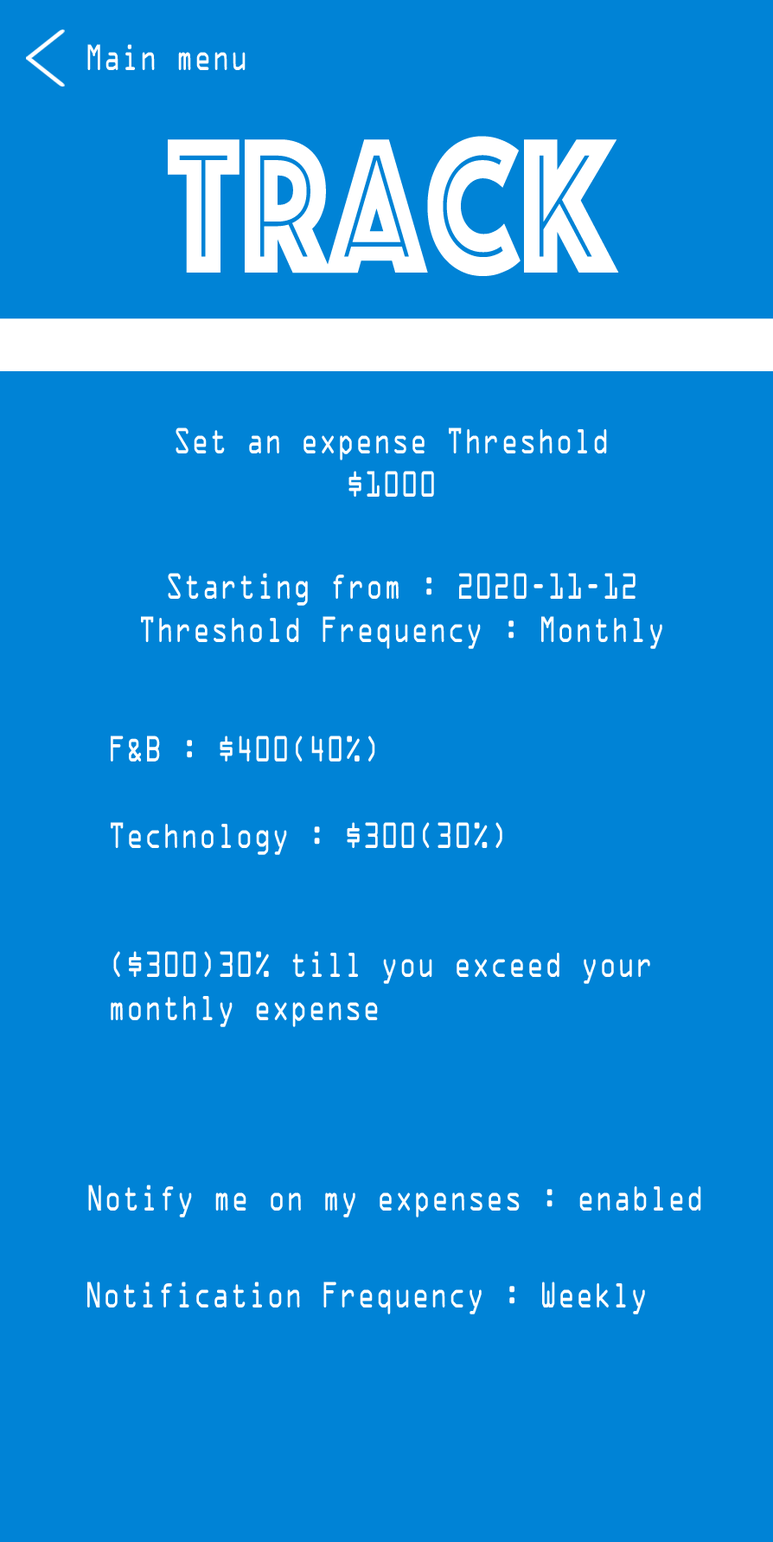
<style>
.page{position:relative;width:773px;height:1542px;background:#0083d6}
.page>*{position:absolute;margin:0}
.t1{font:32.9px "OCRAStd";color:#ffffff;scale:0.77 1}
.t2{font:199.5px "Phosphate-Inline";color:#ffffff;scale:0.77 1}
.t3{font:32.9px/43.1px "OCRAStd";color:#ffffff;scale:0.77 1}
</style>
<div class="page">
<p class="t1" style="left:87px;top:44px;width:159px;height:26px">Main menu</p>
<p class="t2" style="left:168px;top:136px;width:451px;height:140px">Track</p>
<p class="t3" style="left:176px;top:427px;width:431px;height:70px;text-align:center">Set an expense Threshold<br>$1000</p>
<p class="t3" style="left:141px;top:573px;width:522px;height:76px;text-align:center">Starting from : 2020-11-12<br>Threshold Frequency : Monthly</p>
<p class="t3" style="left:111px;top:735px;width:540px;height:292px">F&amp;B : $400(40%)<br><br>Technology : $300(30%)<br><br><br>($300)30% till you exceed your <br>monthly expense</p>
<p class="t1" style="left:88px;top:1184px;width:614px;height:33px">Notify me on my expenses : enabled</p>
<p class="t1" style="left:87px;top:1281px;width:558px;height:33px">Notification Frequency : Weekly</p>
</div>
